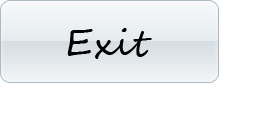
<style>
.page{position:relative;width:256px;height:128px;background:#ffffff}
.page>*{position:absolute;margin:0}
.t1{font:36px "SegoeScript";color:#000000}
</style>
<div class="page">
<p class="t1" style="left:67px;top:28px;width:85px;height:31px">Exit</p>
</div>
